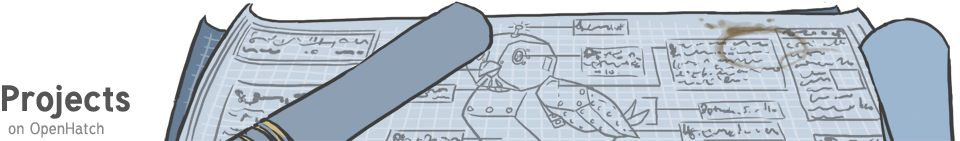
<style>
.page{position:relative;width:960px;height:141px;background:#ffffff}
.page>*{position:absolute;margin:0}
.t1{font:36px "Tuffy-Bold";color:#555555}
.t2{font:16px "Tuffy";color:#888888}
</style>
<div class="page">
<p class="t1" style="left:2px;top:84px;width:128px;height:35px">Projects</p>
<p class="t2" style="left:8px;top:122px;width:96px;height:16px">on OpenHatch</p>
</div>
